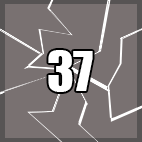
<style>
.page{position:relative;width:142px;height:142px;background:#797171}
.page>*{position:absolute;margin:0}
.t1{font:51px "Impact";color:#ffffff}
</style>
<div class="page">
<p class="t1" style="left:48px;top:50px;width:45px;height:42px">37</p>
</div>
